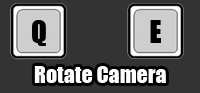
<style>
.page{position:relative;width:200px;height:93px;background:#333333}
.page>*{position:absolute;margin:0}
.t1{font:29.3px "Impact";color:#000000}
.t2{font:21.9px "Impact";color:#ffffff}
</style>
<div class="page">
<p class="t1" style="left:32px;top:20px;width:14px;height:26px">Q</p>
<p class="t1" style="left:150px;top:20px;width:11px;height:23px">E</p>
<p class="t2" style="left:34px;top:66px;width:132px;height:17px">Rotate Camera</p>
</div>
